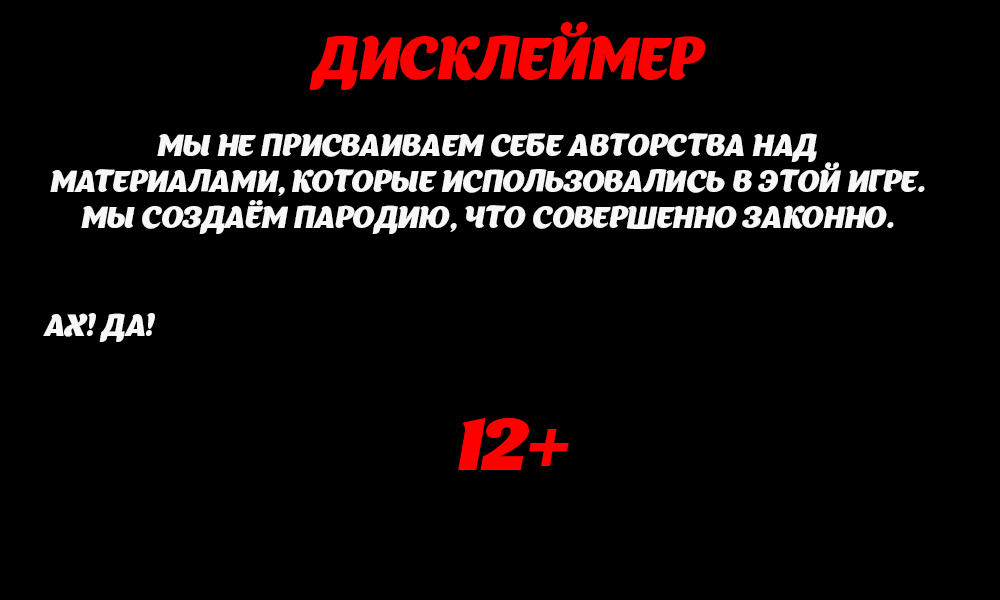
<style>
.page{position:relative;width:1000px;height:600px;background:#000000}
.page>*{position:absolute;margin:0}
.t1{font:57.9px "Appetite-Italic";color:#ff0000}
.t2{font:30px "Appetite-Italic";color:#f7f7f7}
.t3{font:89.6px "Appetite-Italic";color:#ff0000}
</style>
<div class="page">
<p class="t1" style="left:309px;top:22px;width:397px;height:68px">ДИСКЛЕЙМЕР</p>
<p class="t2" style="left:43px;top:133px;width:882px;height:209px;text-align:center">МЫ НЕ ПРИСВАИВАЕМ СЕБЕ АВТОРСТВА НАД МАТЕРИАЛАМИ, КОТОРЫЕ ИСПОЛЬЗОВАЛИСЬ В ЭТОЙ ИГРЕ. МЫ СОЗДАЁМ ПАРОДИЮ, ЧТО СОВЕРШЕННО ЗАКОННО.<br><br><br>АХ! ДА!</p>
<p class="t3" style="left:458px;top:418px;width:111px;height:52px">12+</p>
</div>
